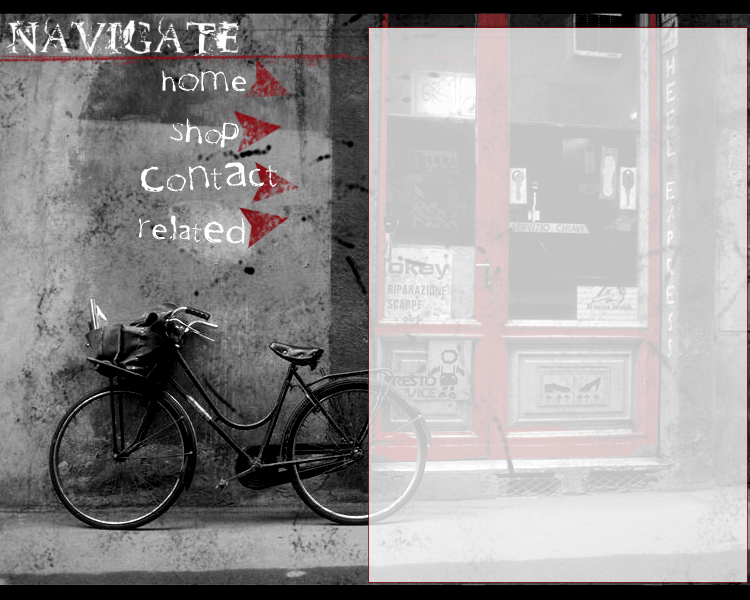
<style>
.page{position:relative;width:750px;height:600px}
.page>*{position:absolute;margin:0}
.t1{font:30px "OneWayRegular";letter-spacing:0.05em;color:#ffffff}
.t2{font:36px "OneWayRegular";letter-spacing:0.05em;color:#ffffff}
</style>
<div class="page">
<p class="t1" style="left:162px;top:70px;width:85px;height:22px">hOMe</p>
<p class="t1" style="left:170px;top:118px;width:69px;height:30px;rotate:3deg">SHoP</p>
<p class="t2" style="left:140px;top:162px;width:137px;height:30px;rotate:-3deg">CoNtAct</p>
<p class="t1" style="left:138px;top:215px;width:107px;height:29px;rotate:4deg">ReLatED</p>
</div>
